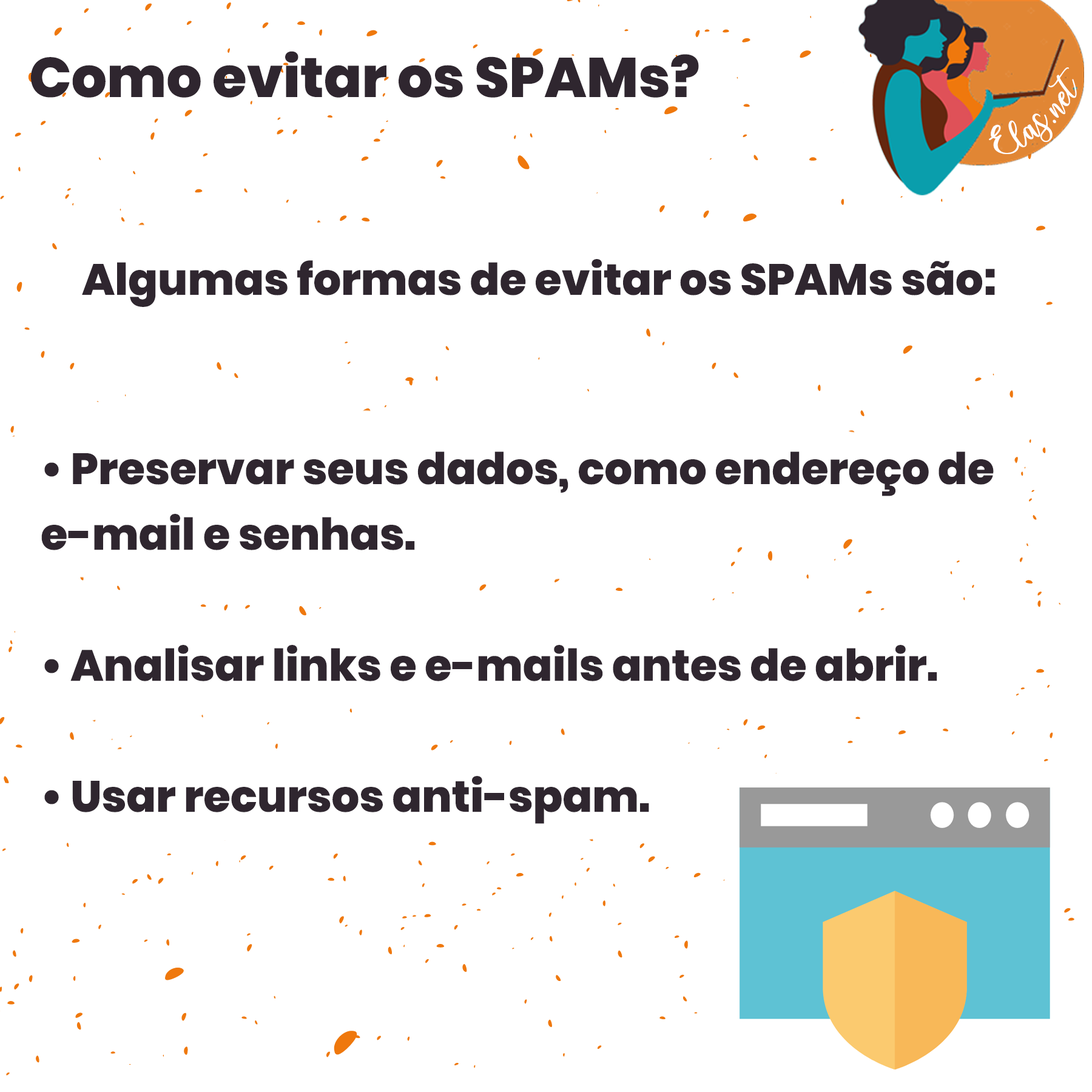
<style>
.page{position:relative;width:1092px;height:1092px;background:#ffffff}
.page>*{position:absolute;margin:0}
.t1{font:55.8px "Poppins-ExtraBold";color:#2f262f}
.t2{font:25px "charlinda-Regular";color:#ffffff;scale:1.18 1}
.t3{font:43.7px "Poppins-ExtraBold";color:#2f262f}
.t4{font:43.7px/65.5px "Poppins-ExtraBold";color:#2f262f}
</style>
<div class="page">
<p class="t1" style="left:31px;top:51px;width:668px;height:47px">Como evitar os SPAMs?</p>
<p class="t2" style="left:989px;top:67px;width:88px;height:87px;rotate:-42deg">Elas.net</p>
<p class="t3" style="left:82px;top:259px;width:913px;height:48px">Algumas formas de evitar os SPAMs são:</p>
<p class="t4" style="left:41px;top:451px;width:953px;height:373px">• Preservar seus dados, como endereço de <br>e-mail e senhas.<br><br>• Analisar links e e-mails antes de abrir.<br><br>• Usar recursos anti-spam.</p>
</div>
